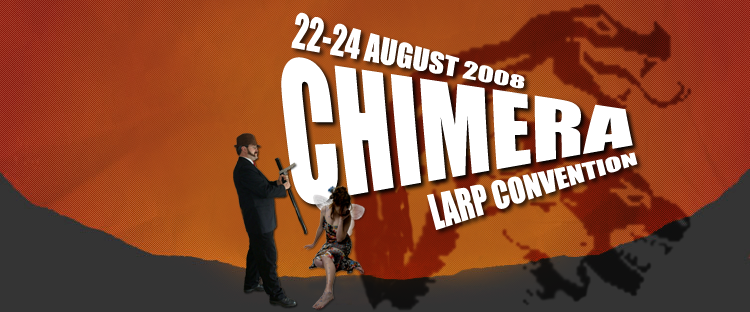
<style>
.page{position:relative;width:750px;height:312px}
.page>*{position:absolute;margin:0}
.t1{font:30.1px "Impact";color:#ffffff}
.t2{font:97.9px "Impact";color:#ffffff}
</style>
<div class="page">
<p class="t1" style="left:291px;top:12px;width:234px;height:77px;rotate:9deg">22-24 AUGUST 2008</p>
<p class="t2" style="left:281px;top:57px;width:352px;height:148px">CHIMERA</p>
<p class="t1" style="left:427px;top:152px;width:211px;height:78px;rotate:-15deg">LARP CONVENTION</p>
</div>
